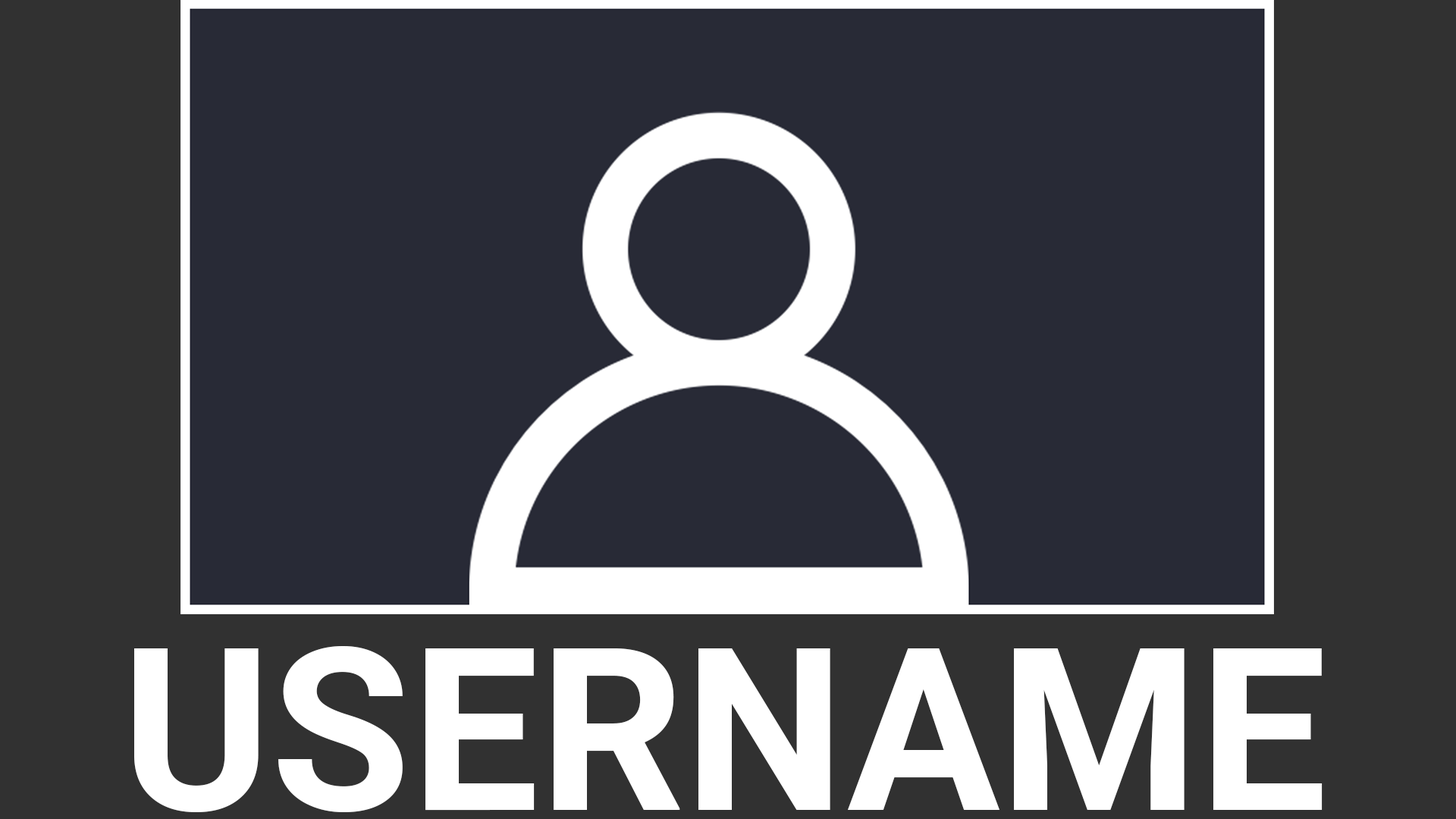
<style>
.page{position:relative;width:1456px;height:819px;background:#282a36}
.page>*{position:absolute;margin:0}
.t1{font:227.5px "Roboto-Bold";color:#ffffff}
</style>
<div class="page">
<p class="t1" style="left:134px;top:646px;width:1189px;height:166px">USERNAME</p>
</div>
